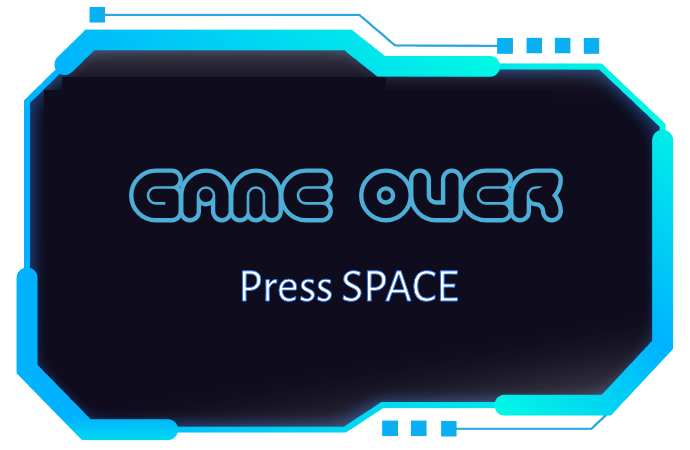
<style>
.page{position:relative;width:690px;height:450px;background:#0e0c1d}
.page>*{position:absolute;margin:0}
.t1{font:61px "TechniqueOLBRK";color:#4daed7}
.t2{font:47px "AlegreyaSans-Regular"}
</style>
<div class="page">
<p class="t1" style="left:129px;top:168px;width:434px;height:55px">GAME OVER</p>
<p class="t2" style="left:241px;top:269px;width:218px;height:34px">Press SPACE</p>
</div>
